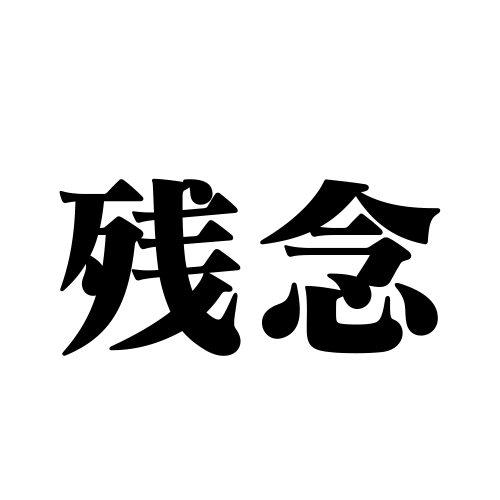
<style>
.page{position:relative;width:500px;height:500px;background:#ffffff}
.page>*{position:absolute;margin:0}
.t1{font:200px "MatissePro-EB";color:#000000}
</style>
<div class="page">
<p class="t1" style="left:59px;top:178px;width:382px;height:178px">残念</p>
</div>
